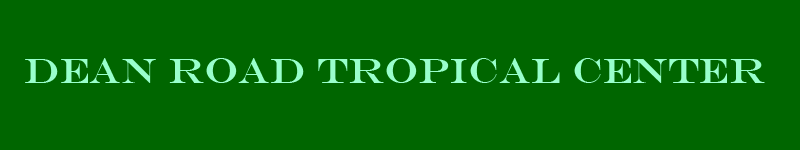
<style>
.page{position:relative;width:800px;height:150px;background:#006600}
.page>*{position:absolute;margin:0}
.t1{font:36px "EngraversMT";color:#99ffcc}
</style>
<div class="page">
<p class="t1" style="left:25px;top:58px;width:740px;height:25px">DEAN ROAD TROPICAL CENTER</p>
</div>
